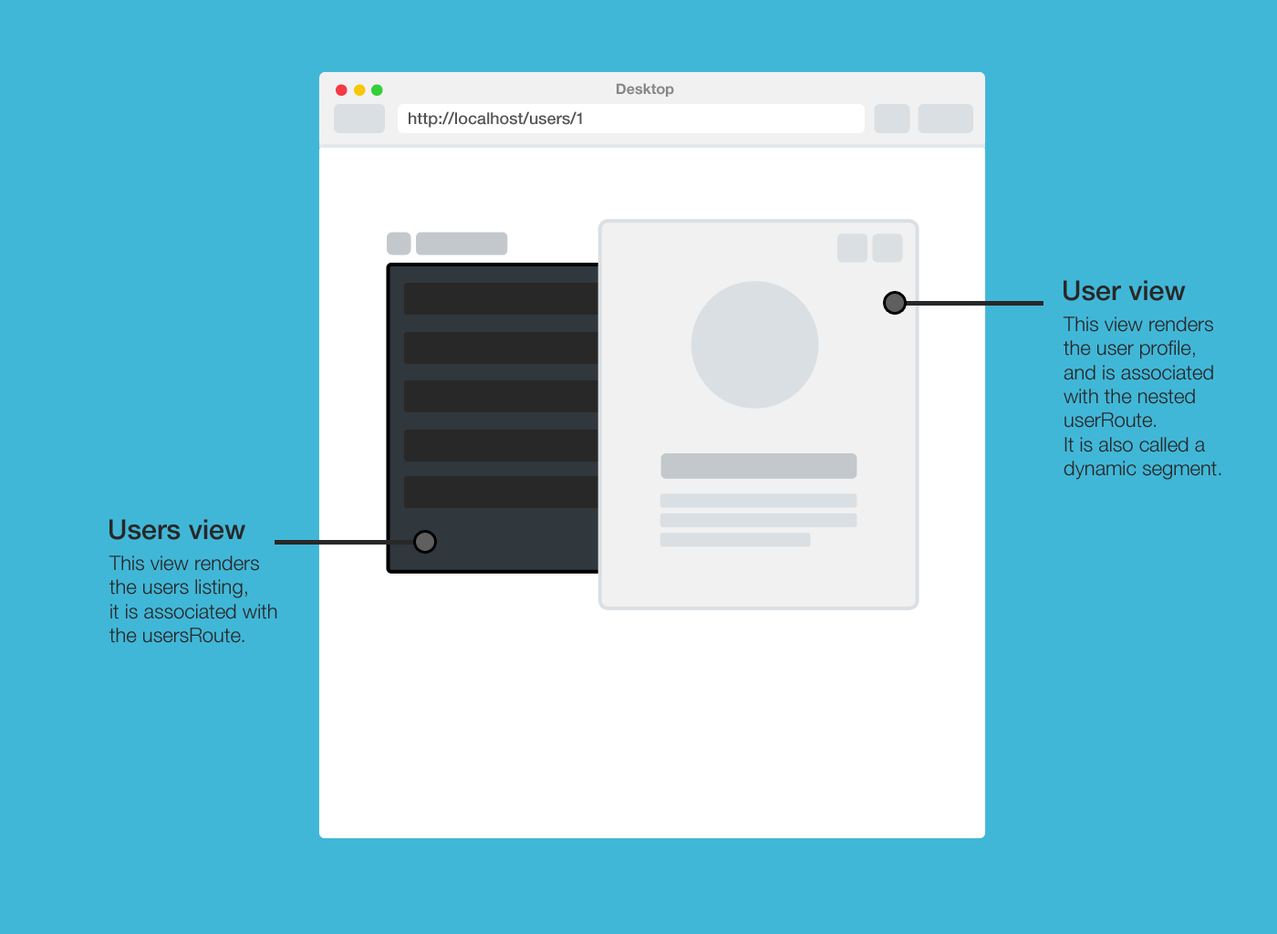
<style>
.page{position:relative;width:1277px;height:934px;background:#41b7d8}
.page>*{position:absolute;margin:0}
.t1{font:14.6px "HelveticaNeue-Bold";color:#878787}
.t2{font:16.4px "HelveticaNeue-Medium";color:#555555}
.t3{font:27.4px "HelveticaNeue-Medium";color:#282828}
.t4{font:20.1px "HelveticaNeue-Light";color:#282828}
</style>
<div class="page">
<p class="t1" style="left:617px;top:83px;width:57px;height:14px">Desktop</p>
<p class="t2" style="left:409px;top:111px;width:173px;height:17px">http://localhost/users/1</p>
<p class="t3" style="left:1063px;top:280px;width:123px;height:21px">User view</p>
<p class="t4" style="left:1062px;top:316px;width:159px;height:164px">This view renders the user profile, and is associated with the nested userRoute. <br>It is also called a dynamic segment.</p>
<p class="t3" style="left:109px;top:519px;width:136px;height:21px">Users view</p>
<p class="t4" style="left:109px;top:555px;width:168px;height:88px">This view renders the users listing, <br>it is associated with <br>the usersRoute.</p>
</div>
